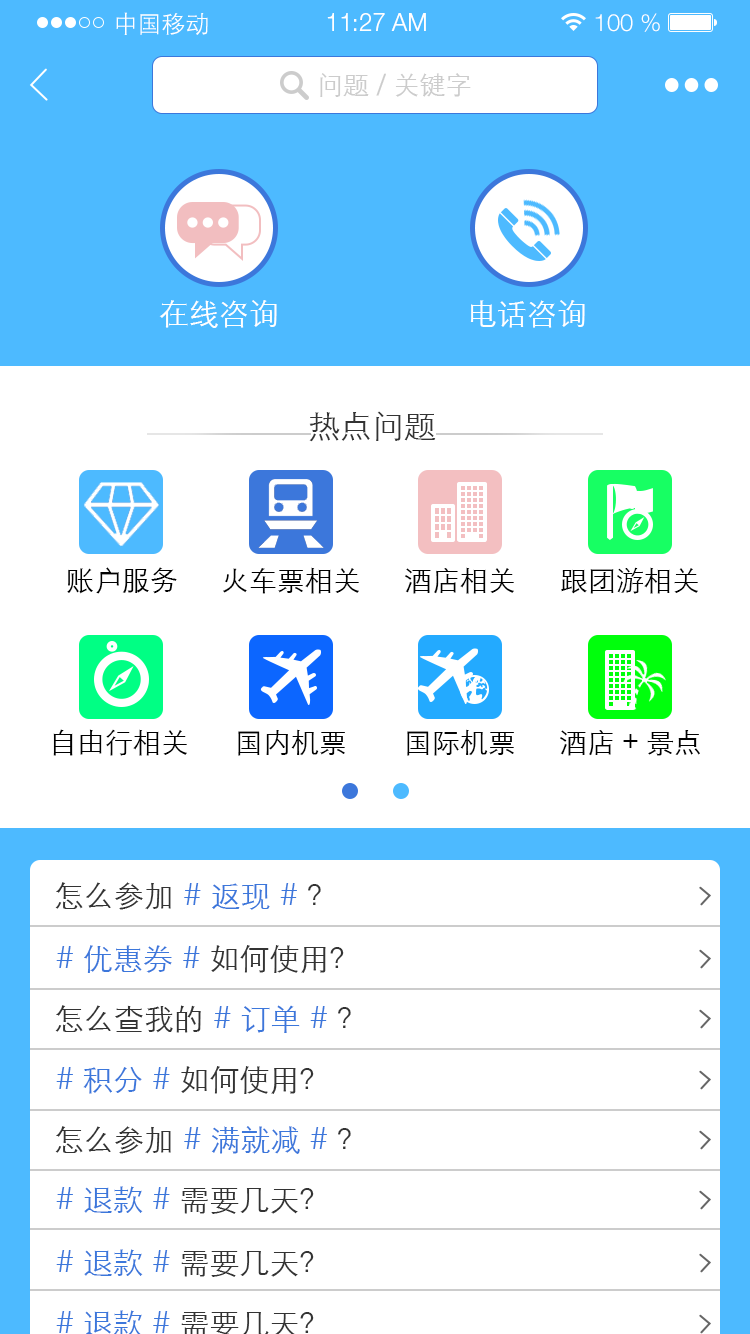
<style>
.page{position:relative;width:750px;height:1334px;background:#ffffff}
.page>*{position:absolute;margin:0}
.t1{font:24px "STXihei";color:#ffffff}
.t2{font:24px "HelveticaNeueLTPro-Lt";color:#ffffff}
.t3{font:26px "STXihei";color:#cccccc}
.t4{font:30px "STXihei";color:#ffffff}
.t5{font:32px "STXihei";color:#333333}
.t6{font:28px "STXihei";color:#000000}
.t7{font:30px "STXihei";color:#333333}
.t8{font:30px "STXihei";color:#3c77db}
</style>
<div class="page">
<p class="t1" style="left:116px;top:12px;width:92px;height:23px">中国移动</p>
<p class="t2" style="left:327px;top:13px;width:99px;height:18px">11:27 AM</p>
<p class="t2" style="left:595px;top:13px;width:65px;height:19px">100 %</p>
<p class="t3" style="left:320px;top:73px;width:151px;height:24px">问题/关键字</p>
<p class="t4" style="left:159px;top:300px;width:118px;height:28px">在线咨询</p>
<p class="t4" style="left:470px;top:300px;width:115px;height:28px">电话咨询</p>
<p class="t5" style="left:309px;top:411px;width:127px;height:31px">热点问题</p>
<p class="t6" style="left:67px;top:567px;width:110px;height:27px">账户服务</p>
<p class="t6" style="left:223px;top:567px;width:136px;height:27px">火车票相关</p>
<p class="t6" style="left:405px;top:567px;width:109px;height:27px">酒店相关</p>
<p class="t6" style="left:561px;top:567px;width:137px;height:27px">跟团游相关</p>
<p class="t6" style="left:53px;top:729px;width:134px;height:27px">自由行相关</p>
<p class="t6" style="left:238px;top:729px;width:107px;height:27px">国内机票</p>
<p class="t6" style="left:407px;top:729px;width:107px;height:27px">国际机票</p>
<p class="t6" style="left:560px;top:730px;width:140px;height:26px">酒店+景点</p>
<p class="t7" style="left:55px;top:882px;width:266px;height:28px">怎么参加<span class="t8">#返现#</span>？</p>
<p class="t8" style="left:56px;top:945px;width:288px;height:28px">#优惠券#<span class="t7">如何使用？</span></p>
<p class="t7" style="left:55px;top:1005px;width:296px;height:28px">怎么查我的<span class="t8">#订单#</span>？</p>
<p class="t7" style="left:56px;top:1066px;width:258px;height:28px"><span class="t8">#积分#</span>如何使用？</p>
<p class="t8" style="left:55px;top:1126px;width:296px;height:28px"><span class="t7">怎么参加</span>#满就减#<span class="t7">？</span></p>
<p class="t7" style="left:56px;top:1186px;width:258px;height:28px"><span class="t8">#退款#</span>需要几天？</p>
<p class="t7" style="left:56px;top:1249px;width:258px;height:28px"><span class="t8">#退款#</span>需要几天？</p>
</div>
